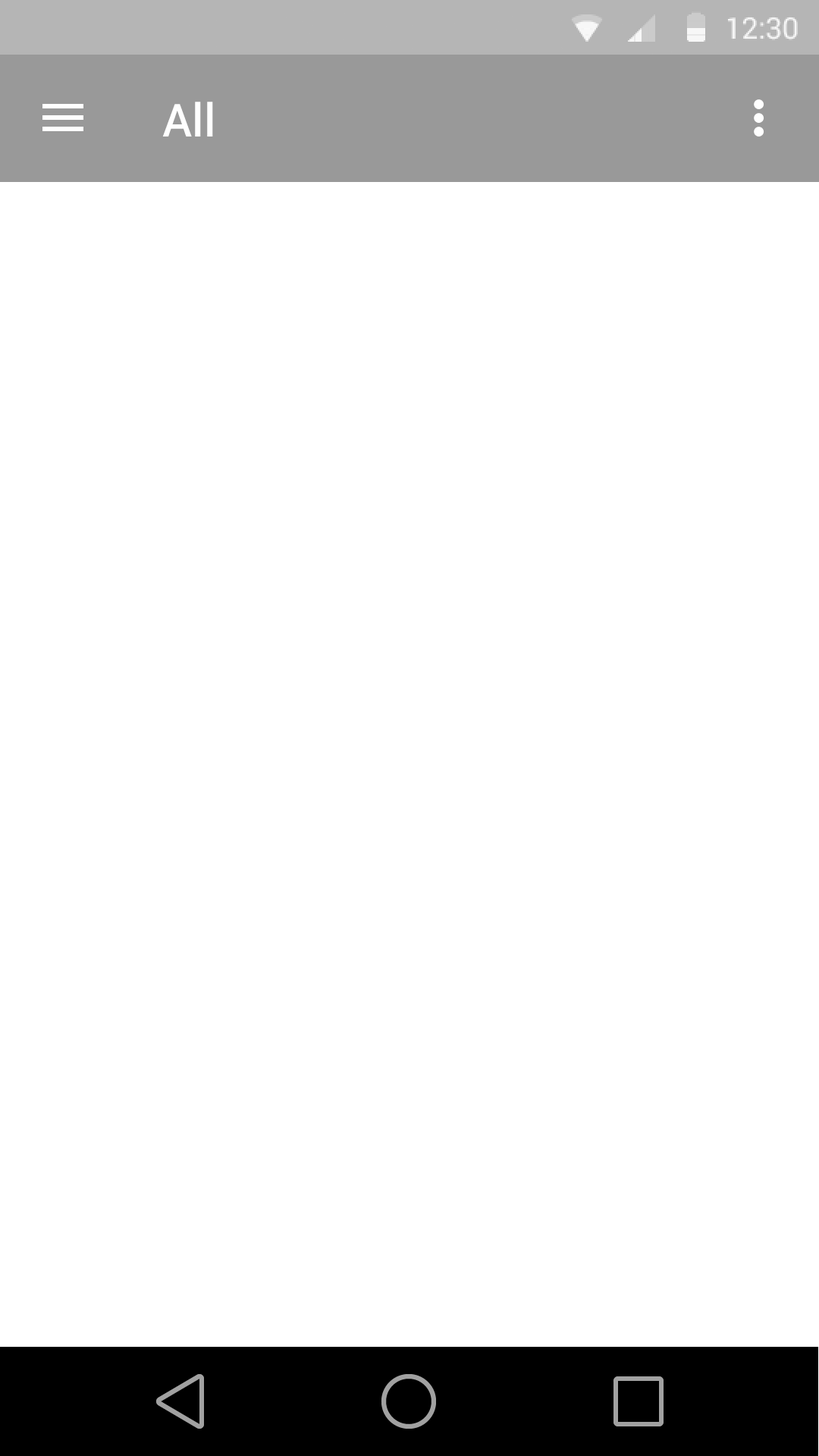
<style>
.page{position:relative;width:819px;height:1456px;background:#ffffff}
.page>*{position:absolute;margin:0}
.t1{font:45.5px "Roboto-Medium";color:#ffffff}
</style>
<div class="page">
<p class="t1" style="left:162px;top:102px;width:51px;height:34px">All</p>
</div>
